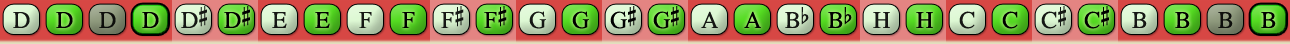
<style>
.page{position:relative;width:1290px;height:44px}
.page>*{position:absolute;margin:0}
.t1{font:24px "OpusChords";letter-spacing:-0.025em;color:#000000}
.t2{font:24px "OpusChords";color:#000000}
</style>
<div class="page">
<p class="t1" style="left:181px;top:6px;width:26px;height:22px;opacity:0.9">D#</p>
<p class="t1" style="left:224px;top:6px;width:26px;height:22px">D#</p>
<p class="t2" style="left:441px;top:6px;width:23px;height:22px;opacity:0.9">F#</p>
<p class="t2" style="left:484px;top:6px;width:23px;height:22px">F#</p>
<p class="t1" style="left:610px;top:6px;width:26px;height:23px">G#</p>
<p class="t1" style="left:653px;top:6px;width:26px;height:23px">G#</p>
<p class="t2" style="left:1041px;top:6px;width:25px;height:23px;opacity:0.9">C#</p>
<p class="t2" style="left:1084px;top:6px;width:25px;height:23px">C#</p>
<p class="t2" style="left:13px;top:12px;width:17px;height:16px;opacity:0.9">D</p>
<p class="t2" style="left:56px;top:12px;width:17px;height:16px">D</p>
<p class="t2" style="left:99px;top:12px;width:17px;height:16px;opacity:0.9">D</p>
<p class="t2" style="left:142px;top:12px;width:17px;height:16px">D</p>
<p class="t2" style="left:272px;top:12px;width:15px;height:16px;opacity:0.9">E</p>
<p class="t2" style="left:315px;top:12px;width:15px;height:16px">E</p>
<p class="t2" style="left:359px;top:12px;width:13px;height:16px;opacity:0.9">F</p>
<p class="t2" style="left:402px;top:12px;width:13px;height:16px">F</p>
<p class="t2" style="left:529px;top:11px;width:17px;height:18px;opacity:0.9">G</p>
<p class="t2" style="left:572px;top:11px;width:17px;height:18px">G</p>
<p class="t2" style="left:701px;top:11px;width:17px;height:17px;opacity:0.9">A</p>
<p class="t2" style="left:744px;top:11px;width:17px;height:17px">A</p>
<p class="t2" style="left:785px;top:7px;width:24px;height:21px;opacity:0.9">Bb</p>
<p class="t2" style="left:828px;top:7px;width:24px;height:21px">Bb</p>
<p class="t2" style="left:873px;top:12px;width:17px;height:16px;opacity:0.9">H</p>
<p class="t2" style="left:916px;top:12px;width:17px;height:16px">H</p>
<p class="t2" style="left:959px;top:11px;width:16px;height:18px;opacity:0.9">C</p>
<p class="t2" style="left:1002px;top:11px;width:16px;height:18px">C</p>
<p class="t2" style="left:1132px;top:12px;width:15px;height:16px;opacity:0.9">B</p>
<p class="t2" style="left:1175px;top:12px;width:15px;height:16px">B</p>
<p class="t2" style="left:1218px;top:12px;width:15px;height:16px;opacity:0.9">B</p>
<p class="t2" style="left:1261px;top:12px;width:15px;height:16px">B</p>
</div>
